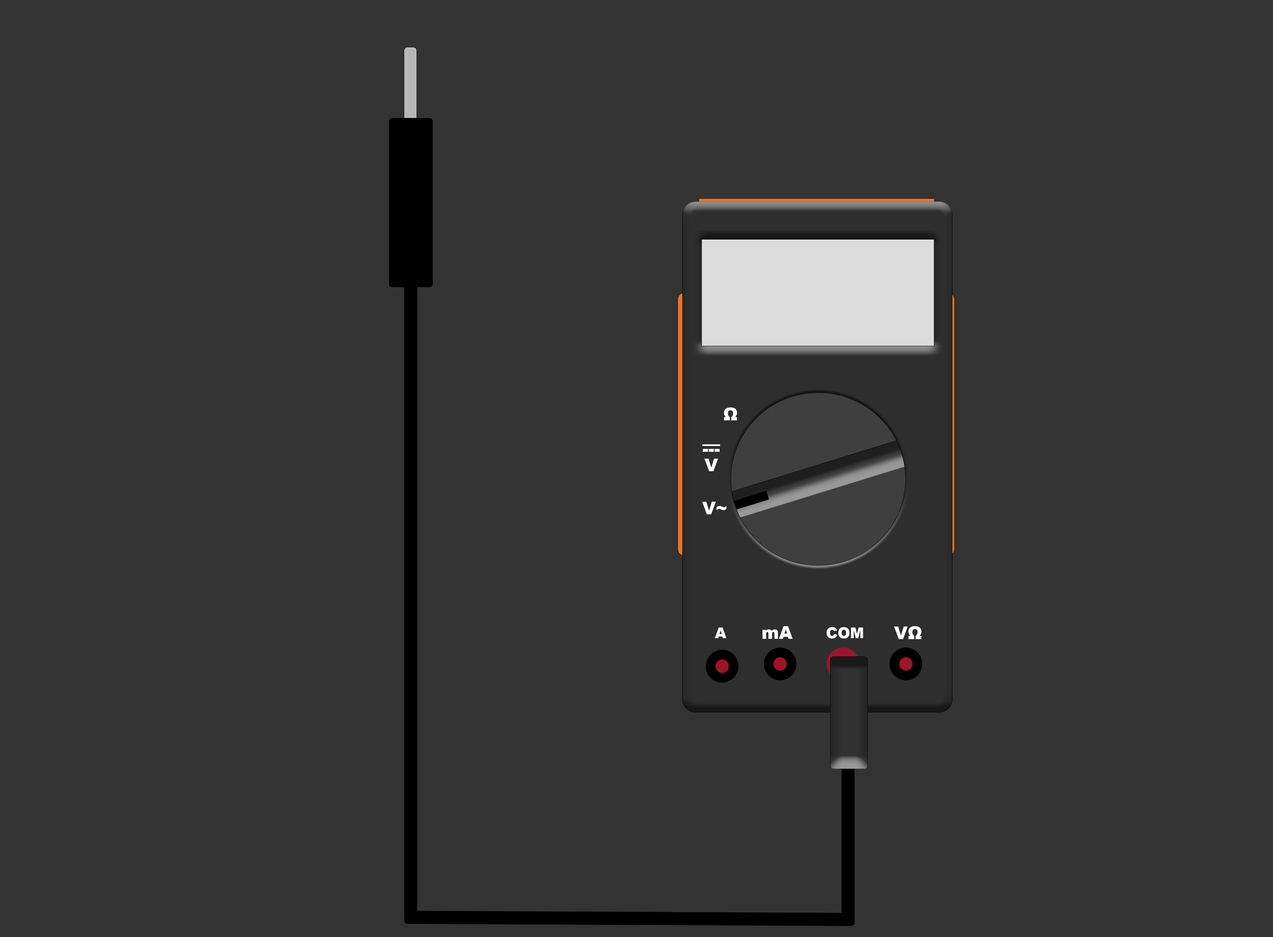
<style>
.page{position:relative;width:1273px;height:937px;background:#333333}
.page>*{position:absolute;margin:0}
.t1{font:17.6px "Arial-Black";color:#ffffff}
.t2{font:17.6px/5.4px "Arial-Black";color:#ffffff}
.t3{font:17.6px/10.8px "Arial-Black";color:#ffffff}
.t4{font:14.9px "Arial-Black";color:#ffffff}
</style>
<div class="page">
<p class="t1" style="left:724px;top:407px;width:13px;height:13px">Ω</p>
<p class="t2" style="left:702px;top:444px;width:18px;height:27px;text-align:center">—<br>---<br><br><span class="t3">V</span></p>
<p class="t1" style="left:702px;top:502px;width:24px;height:12px">V~</p>
<p class="t4" style="left:715px;top:627px;width:11px;height:11px">A</p>
<p class="t1" style="left:762px;top:626px;width:30px;height:13px">mA</p>
<p class="t4" style="left:826px;top:627px;width:37px;height:11px">COM</p>
<p class="t1" style="left:894px;top:626px;width:27px;height:13px">VΩ</p>
</div>
